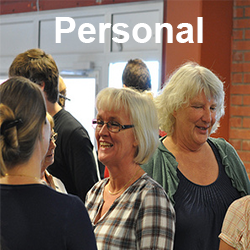
<style>
.page{position:relative;width:250px;height:250px}
.page>*{position:absolute;margin:0}
.t1{font:36px "Arial-BoldMT";color:#ffffff}
</style>
<div class="page">
<p class="t1" style="left:55px;top:17px;width:148px;height:26px">Personal</p>
</div>
